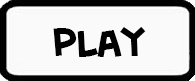
<style>
.page{position:relative;width:195px;height:81px;background:#fafafa}
.page>*{position:absolute;margin:0}
.t1{font:38px "CreativeBlockBBBold";letter-spacing:-0.05em;color:#000000}
</style>
<div class="page">
<p class="t1" style="left:53px;top:27px;width:93px;height:30px">play</p>
</div>
